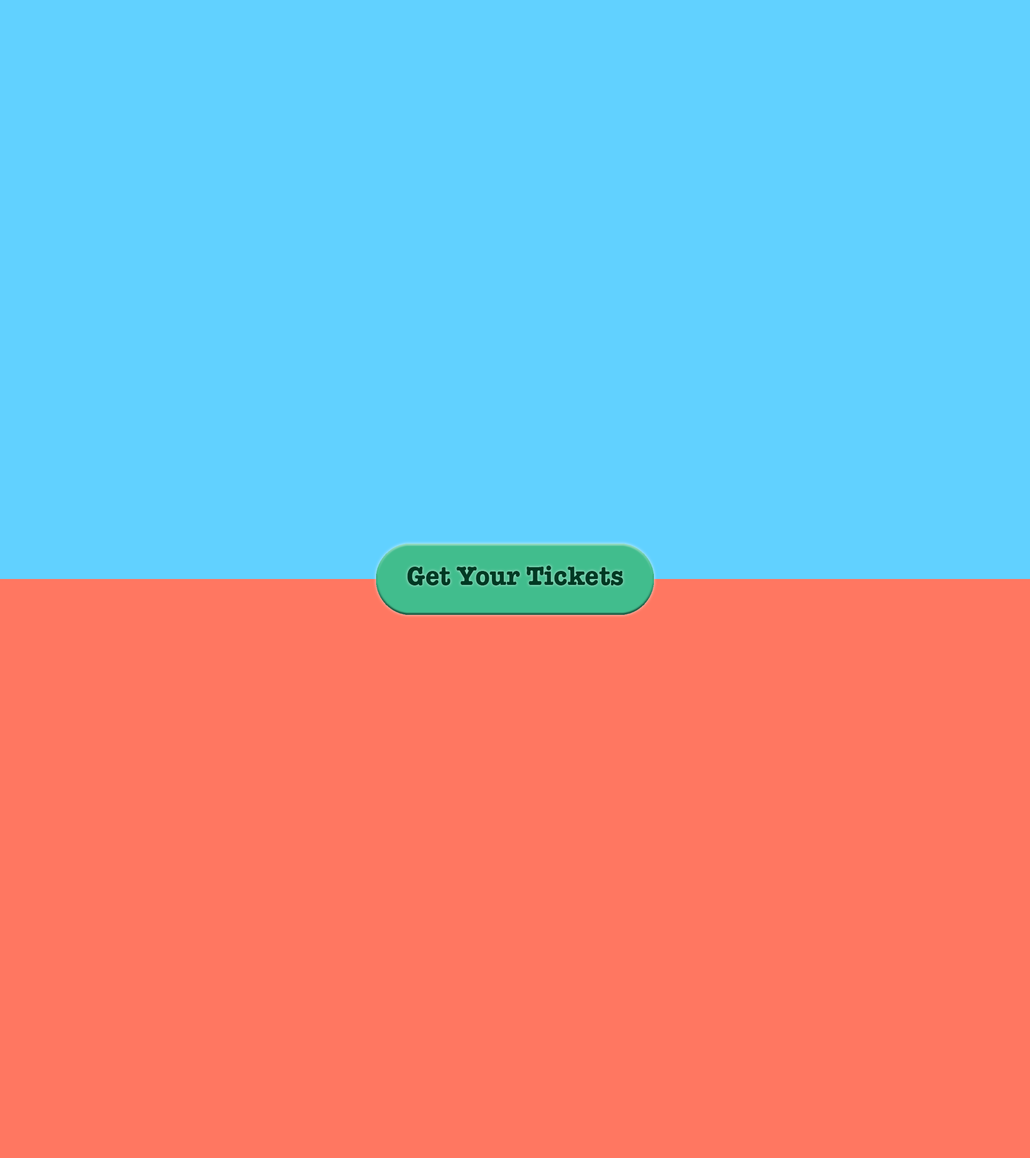
<style>
.page{position:relative;width:1030px;height:1158px;background:#ff7761}
.page>*{position:absolute;margin:0}
.t1{font:26.6px "AmericanTypewriter-Bold";color:#003923}
</style>
<div class="page">
<p class="t1" style="left:407px;top:566px;width:216px;height:20px">Get Your Tickets</p>
</div>
